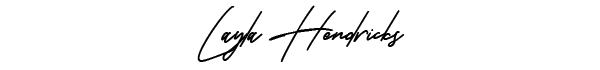
<style>
.page{position:relative;width:600px;height:70px;background:#ffffff}
.page>*{position:absolute;margin:0}
.t1{font:75px "KarstarFree-Regular";color:#000000}
</style>
<div class="page">
<p class="t1" style="left:197px;top:5px;width:208px;height:57px">Layla Hendricks</p>
</div>
